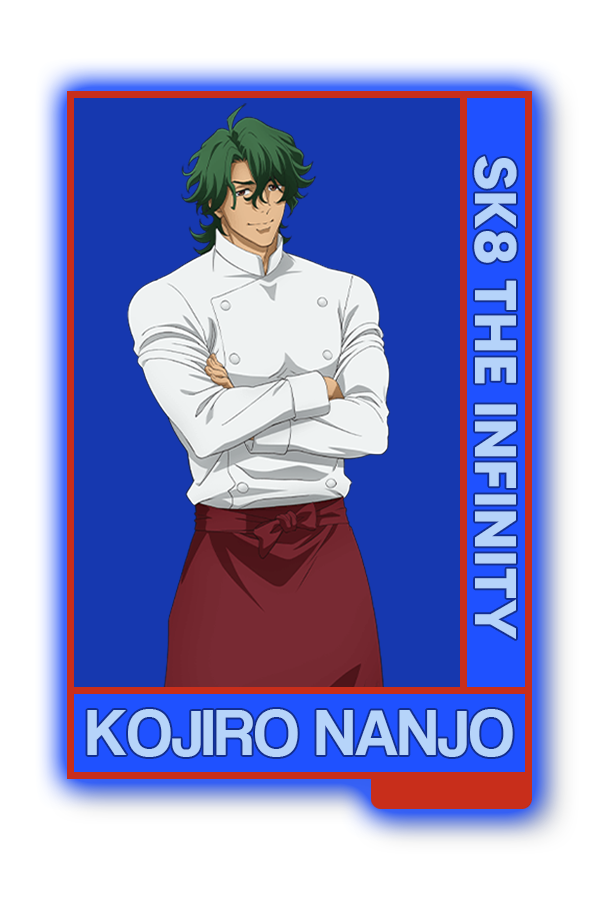
<style>
.page{position:relative;width:600px;height:900px;background:#1638af}
.page>*{position:absolute;margin:0}
.t1{font:58.4px "MADETOMMY-Bold";color:#b5d3fa}
.t2{font:67.4px "CoolveticaRg-Regular";color:#b6d4fa}
</style>
<div class="page">
<p class="t1" style="left:474px;top:156px;width:43px;height:483px;rotate:90deg">SK8 THE INFINITY</p>
<p class="t2" style="left:87px;top:709px;width:426px;height:48px">KOJIRO NANJO</p>
</div>
